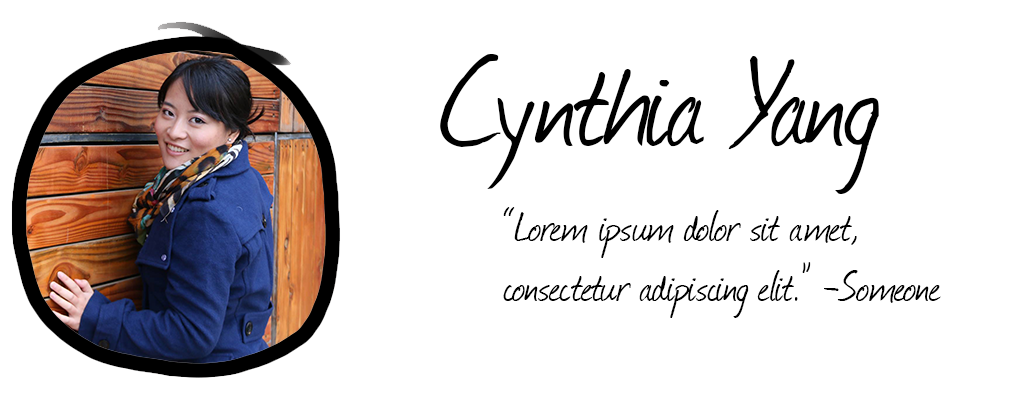
<style>
.page{position:relative;width:1024px;height:400px;background:#ffffff}
.page>*{position:absolute;margin:0}
.t1{font:147.7px "Journal";color:#000000}
.t2{font:50.1px "Journal";color:#000000}
</style>
<div class="page">
<p class="t1" style="left:440px;top:54px;width:439px;height:140px">Cynthia Yang</p>
<p class="t2" style="left:503px;top:207px;width:438px;height:111px">“Lorem ipsum dolor sit amet,<br>consectetur adipiscing elit.” -Someone</p>
</div>
